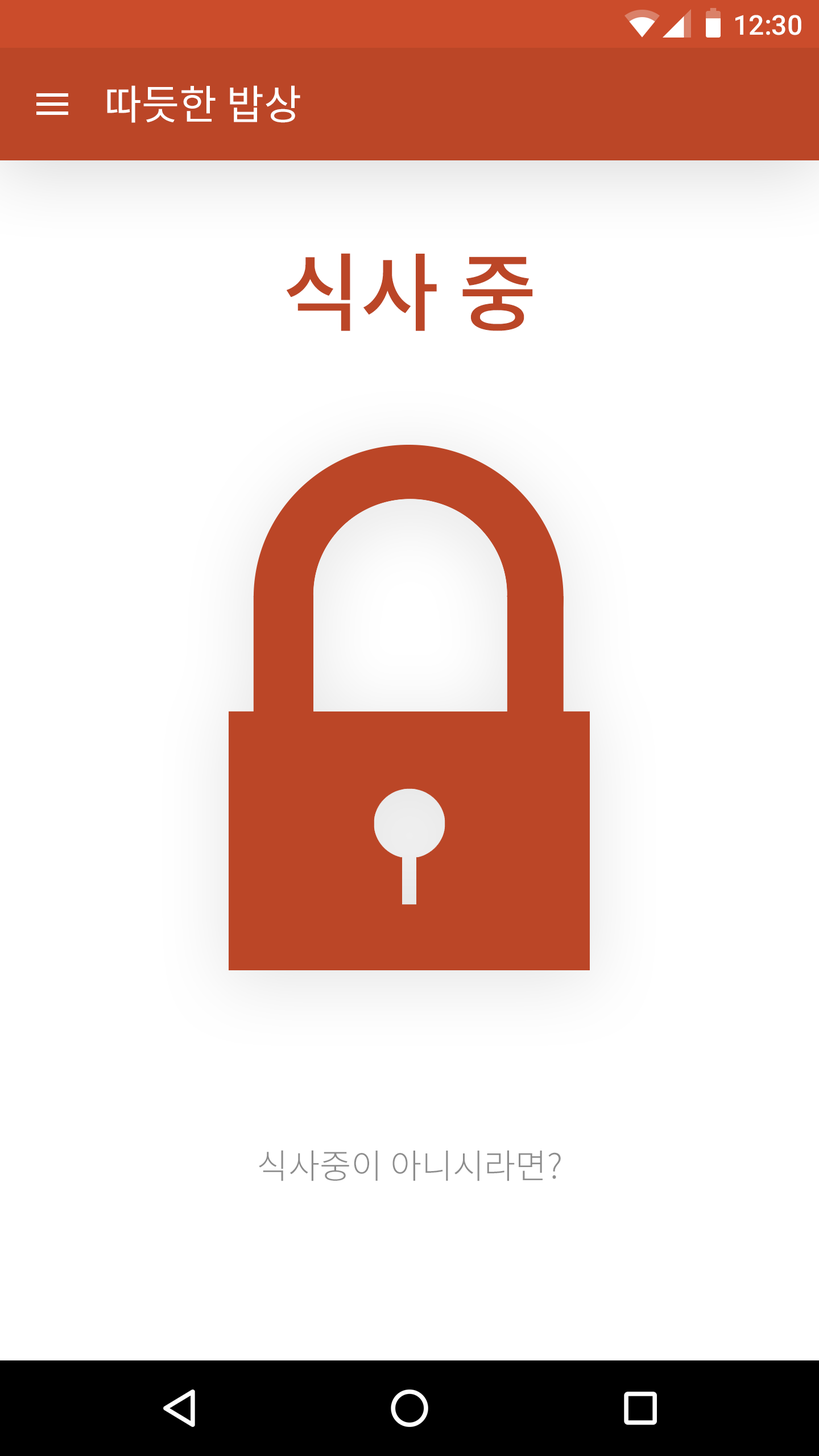
<style>
.page{position:relative;width:819px;height:1456px;background:#ffffff}
.page>*{position:absolute;margin:0}
.t1{font:27.3px "Roboto-Medium";color:#ffffff}
.t2{font:40.9px "NotoSansCJKkr-Regular";color:#ffffff}
.t3{font:85.3px "NotoSansCJKkr-Medium";color:#bb4627}
.t4{font:34.1px "NotoSansCJKkr-Light";color:#8d8d8d}
</style>
<div class="page">
<p class="t1" style="left:735px;top:15px;width:66px;height:20px">12:30</p>
<p class="t2" style="left:107px;top:85px;width:193px;height:38px">따듯한 밥상</p>
<p class="t3" style="left:286px;top:253px;width:247px;height:78px">식사 중</p>
<p class="t4" style="left:259px;top:1150px;width:302px;height:31px">식사중이 아니시라면?</p>
</div>
